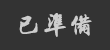
<style>
.page{position:relative;width:110px;height:50px;background:#333333}
.page>*{position:absolute;margin:0}
.t1{font:26.3px "SunYatsenHsingshu-";color:#cdcdcd}
</style>
<div class="page">
<p class="t1" style="left:19px;top:13px;width:73px;height:24px">已准备</p>
</div>
